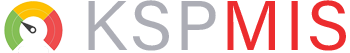
<style>
.page{position:relative;width:350px;height:53px;background:#ffffff}
.page>*{position:absolute;margin:0}
.t1{font:70.4px "AcuminConcept-Regular";letter-spacing:0.04em;color:#acadb5}
.t2{font:70.4px "AcuminConcept-Regular";letter-spacing:0.04em;color:#ec2c2e}
</style>
<div class="page">
<p class="t1" style="left:88px;top:0px;width:258px;height:51px">KSP<span class="t2">MIS</span></p>
</div>
